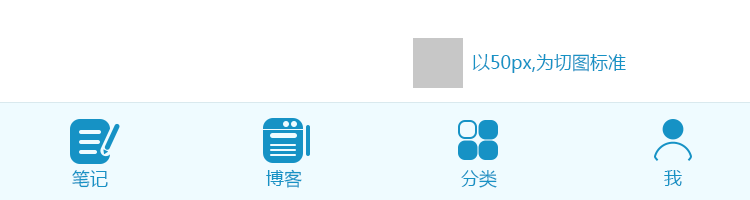
<style>
.page{position:relative;width:750px;height:200px;background:#ffffff}
.page>*{position:absolute;margin:0}
.t1{font:18px "MicrosoftYaHei";color:#1692c5}
</style>
<div class="page">
<p class="t1" style="left:472px;top:54px;width:154px;height:19px">以50px,为切图标准</p>
<p class="t1" style="left:72px;top:170px;width:36px;height:18px">笔记</p>
<p class="t1" style="left:266px;top:169px;width:36px;height:19px">博客</p>
<p class="t1" style="left:461px;top:170px;width:36px;height:18px">分类</p>
<p class="t1" style="left:664px;top:170px;width:18px;height:16px">我</p>
</div>
